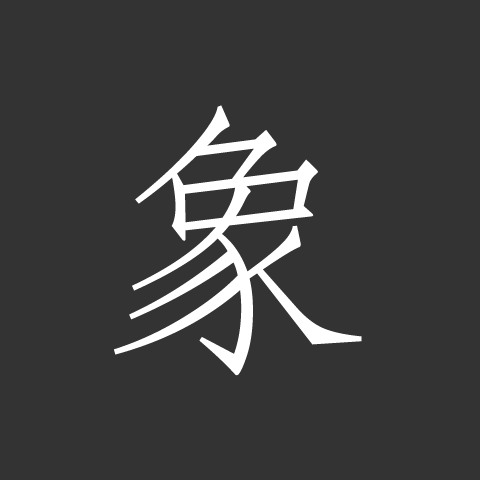
<style>
.page{position:relative;width:480px;height:480px;background:#333333}
.page>*{position:absolute;margin:0}
.t1{font:288px "STFangsong";color:#ffffff}
</style>
<div class="page">
<p class="t1" style="left:114px;top:105px;width:248px;height:271px">象</p>
</div>
